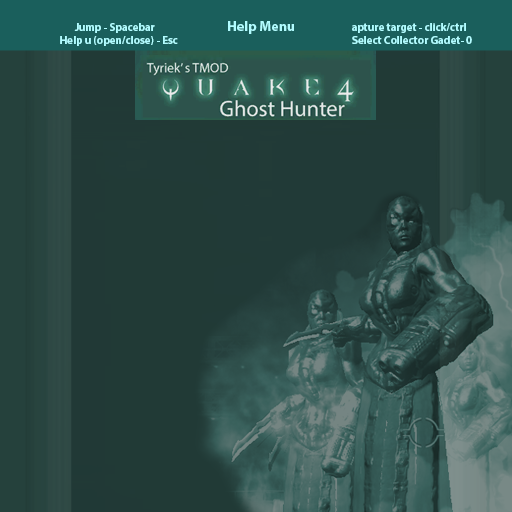
<style>
.page{position:relative;width:512px;height:512px}
.page>*{position:absolute;margin:0}
.t1{font:11px "MyriadPro-Bold";color:#b1fcff}
.t2{font:14px "MyriadPro-Bold";color:#b1fcff}
</style>
<div class="page">
<p class="t1" style="left:60px;top:21px;width:412px;height:25px;text-align:center">Jump - Spacebar       <span class="t2">Help Menu  </span>          apture target - click/ctrl<br>            Help u (open/close) - Esc                     Select Collector Gadet- 0</p>
</div>
